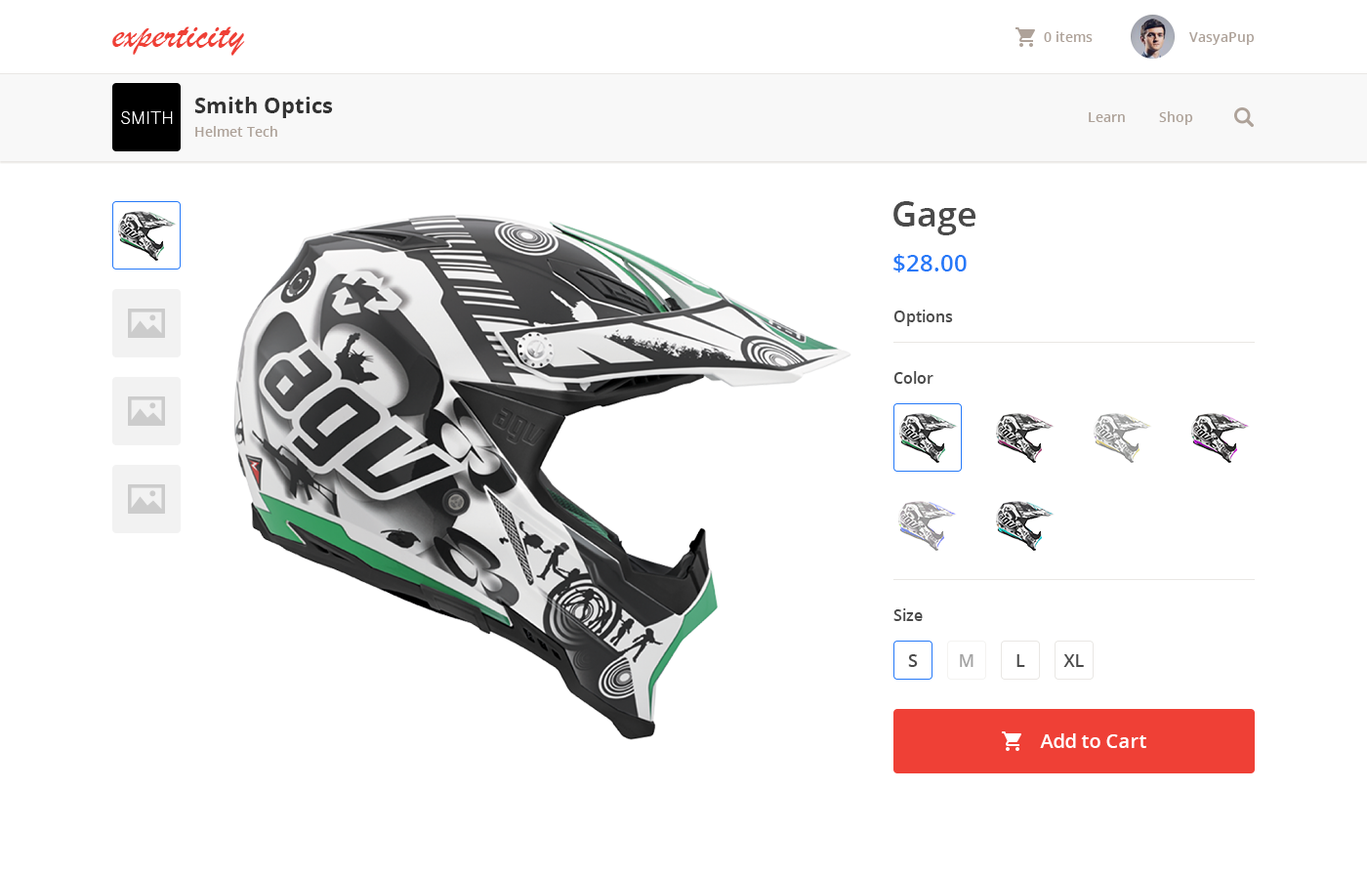
<style>
.page{position:relative;width:1367px;height:873px;background:#ffffff}
.page>*{position:absolute;margin:0}
.t1{font:41px "BrushScriptMT";color:#ef4036}
.t2{font:13.7px "OpenSans-Semibold";color:#aea299}
.t3{font:21.5px/23.4px "OpenSans-Bold";color:#333333}
.t4{font:13.7px/23.4px "OpenSans-Semibold";color:#aea299}
.t5{font:35.1px "OpenSans-Semibold";color:#4a4a4a}
.t6{font:23.4px "OpenSans-Semibold";color:#2579f8}
.t7{font:15.6px "OpenSans-Semibold";color:#4a4a4a}
.t8{font:17.6px "OpenSans-Semibold";color:#4a4a4a}
.t9{font:17.6px "OpenSans-Semibold";color:#a4a4a4}
.t10{font:19.5px "OpenSans-Semibold";color:#ffffff}
</style>
<div class="page">
<p class="t1" style="left:112px;top:26px;width:133px;height:30px">experticity</p>
<p class="t2" style="left:1043px;top:31px;width:49px;height:11px">0 items</p>
<p class="t2" style="left:1189px;top:32px;width:65px;height:13px">VasyaPup</p>
<p class="t3" style="left:195px;top:97px;width:138px;height:40px">Smith Optics<br><span class="t4">Helmet Tech</span></p>
<p class="t2" style="left:1088px;top:112px;width:36px;height:10px">Learn</p>
<p class="t2" style="left:1159px;top:111px;width:34px;height:14px">Shop</p>
<p class="t5" style="left:893px;top:201px;width:82px;height:34px">Gage</p>
<p class="t6" style="left:893px;top:254px;width:73px;height:18px">$28.00</p>
<p class="t7" style="left:893px;top:309px;width:60px;height:17px">Options</p>
<p class="t7" style="left:893px;top:371px;width:40px;height:13px">Color</p>
<p class="t7" style="left:893px;top:608px;width:29px;height:13px">Size</p>
<p class="t8" style="left:908px;top:654px;width:10px;height:13px">S</p>
<p class="t9" style="left:959px;top:654px;width:14px;height:13px">M</p>
<p class="t8" style="left:1016px;top:654px;width:9px;height:13px">L</p>
<p class="t8" style="left:1063px;top:654px;width:20px;height:13px">XL</p>
<p class="t10" style="left:1040px;top:733px;width:106px;height:15px">Add to Cart</p>
</div>
